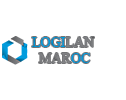
<style>
.page{position:relative;width:126px;height:100px;background:#ffffff}
.page>*{position:absolute;margin:0}
.t1{font:14px "TimesNewRomanPSMT";color:#818285}
.t2{font:14px "TimesNewRomanPSMT";color:#009cdd}
.t3{font:14px "TimesNewRomanPSMT";color:#009cde}
</style>
<div class="page">
<p class="t1" style="left:32px;top:37px;width:62px;height:26px"><span class="t2">LOGI</span>LAN<br>  MAR<span class="t3">OC</span></p>
</div>
